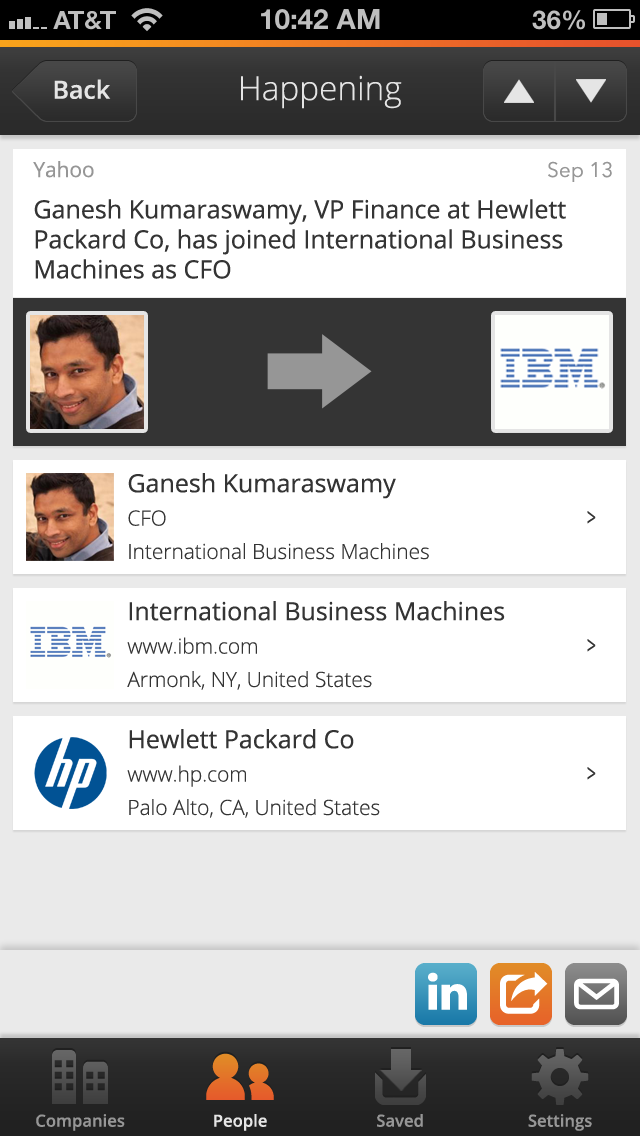
<style>
.page{position:relative;width:640px;height:1136px;background:#ffffff}
.page>*{position:absolute;margin:0}
.t1{font:33.3px "OpenSans-Light";color:#e5e5e5}
.t2{font:25px "OpenSans-Semibold";color:#e5e5e5}
.t3{font:25px "OpenSans";color:#343434}
.t4{font:20.8px "OpenSans";color:#969696}
.t5{font:20.8px "AvenirNext-Regular";color:#969696}
.t6{font:20.8px "OpenSans-Light";color:#343434}
.t7{font:25px "OpenSans";color:#343434;scale:0.64 1}
.t8{font:16.7px "OpenSans-Semibold";color:#969696}
.t9{font:16.7px "OpenSans-Semibold";color:#e5e5e5}
</style>
<div class="page">
<p class="t1" style="left:241px;top:75px;width:161px;height:34px">Happening</p>
<p class="t2" style="left:54px;top:79px;width:57px;height:20px">Back</p>
<p class="t3" style="left:33px;top:161px;width:533px;height:118px"><span class="t4">Yahoo<br></span>Ganesh Kumaraswamy, VP Finance at Hewlett Packard Co, has joined International Business Machines as CFO</p>
<p class="t5" style="left:548px;top:161px;width:64px;height:21px">Sep 13</p>
<p class="t6" style="left:128px;top:473px;width:301px;height:87px"><span class="t3">Ganesh Kumaraswamy<br></span>CFO<br>International Business Machines</p>
<p class="t7" style="left:587px;top:511px;width:9px;height:13px">&gt;</p>
<p class="t6" style="left:127px;top:601px;width:378px;height:89px"><span class="t3">International Business Machines<br></span>www.ibm.com<br>Armonk, NY, United States</p>
<p class="t7" style="left:587px;top:639px;width:9px;height:13px">&gt;</p>
<p class="t6" style="left:127px;top:729px;width:253px;height:89px"><span class="t3">Hewlett Packard Co<br></span>www.hp.com<br>Palo Alto, CA, United States</p>
<p class="t7" style="left:587px;top:767px;width:9px;height:13px">&gt;</p>
<p class="t8" style="left:36px;top:1114px;width:89px;height:17px">Companies</p>
<p class="t9" style="left:214px;top:1114px;width:53px;height:17px">People</p>
<p class="t8" style="left:377px;top:1114px;width:46px;height:13px">Saved</p>
<p class="t8" style="left:528px;top:1114px;width:64px;height:17px">Settings</p>
</div>
